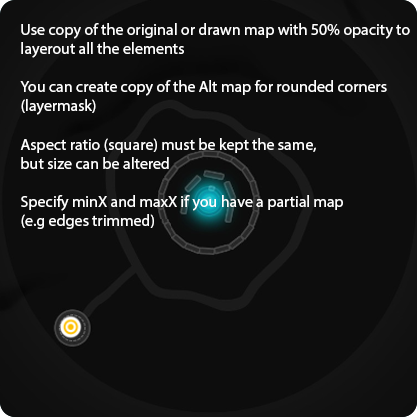
<style>
.page{position:relative;width:417px;height:417px;background:#0d0d0d}
.page>*{position:absolute;margin:0}
.t1{font:16px "MyriadPro-Regular";color:#ffffff}
</style>
<div class="page">
<p class="t1" style="left:20px;top:23px;width:390px;height:206px">Use copy of the original or drawn map with 50% opacity to<br>layerout all the elements<br><br>You can create copy of the Alt map for rounded corners<br>(layermask)<br><br>Aspect ratio (square) must be kept the same,<br>but size can be altered<br><br>Specify minX and maxX if you have a partial map<br>(e.g edges trimmed)</p>
</div>
